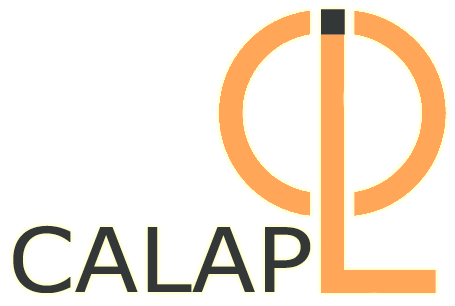
<style>
.page{position:relative;width:455px;height:306px;background:#ffffff}
.page>*{position:absolute;margin:0}
.t1{font:89.1px "Verdana";color:#333737;scale:1.06 1}
</style>
<div class="page">
<p class="t1" style="left:13px;top:225px;width:298px;height:68px">CALAP</p>
</div>
